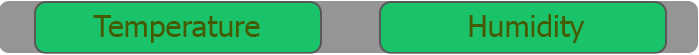
<style>
.page{position:relative;width:699px;height:55px;background:#1ac269}
.page>*{position:absolute;margin:0}
.t1{font:30px "Tahoma";color:#435b02}
</style>
<div class="page">
<p class="t1" style="left:93px;top:15px;width:167px;height:28px">Temperature</p>
<p class="t1" style="left:469px;top:14px;width:116px;height:29px">Humidity</p>
</div>
